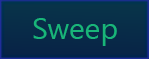
<style>
.page{position:relative;width:149px;height:59px}
.page>*{position:absolute;margin:0}
.t1{font:30px "SegoeUISymbol";color:#19b579}
</style>
<div class="page">
<p class="t1" style="left:33px;top:18px;width:84px;height:28px">Sweep</p>
</div>
